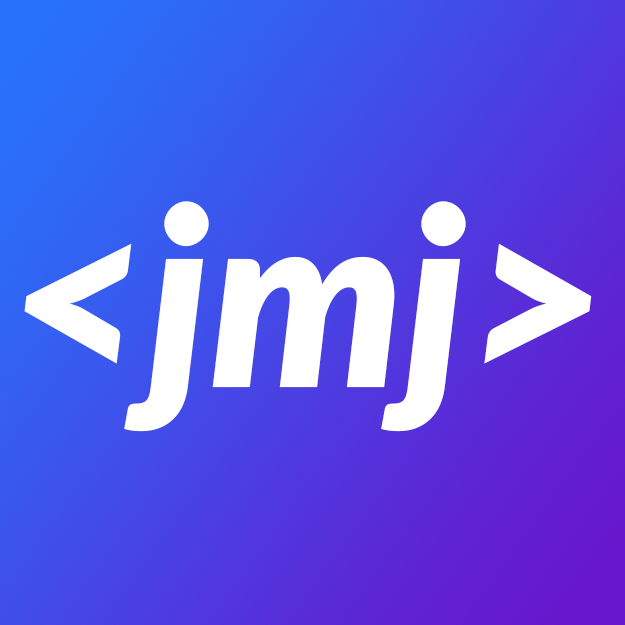
<style>
.page{position:relative;width:625px;height:625px}
.page>*{position:absolute;margin:0}
.t1{font:246.9px "Lato-BlackItalic";color:#ffffff}
</style>
<div class="page">
<p class="t1" style="left:24px;top:201px;width:568px;height:231px">&lt;jmj&gt;</p>
</div>
